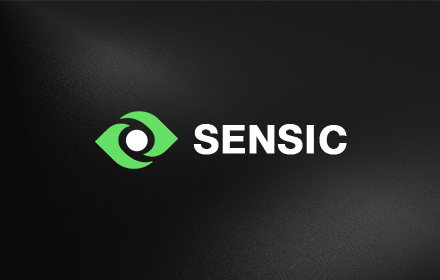
<style>
.page{position:relative;width:440px;height:280px}
.page>*{position:absolute;margin:0}
.t1{font:38.9px "HelveticaNeue-Bold";letter-spacing:0.005em;color:#ffffff;text-transform:uppercase;font-weight:bold}
</style>
<div class="page">
<p class="t1" style="left:193px;top:124px;width:154px;height:31px">SENSIC</p>
</div>
